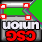
<style>
.page{position:relative;width:42px;height:42px}
.page>*{position:absolute;margin:0}
.t1{font:13.7px "Arial-Black";letter-spacing:-0.075em;color:#eeeaf6}
.t2{font:13.7px "Arial-Black";letter-spacing:-0.075em;color:#ff0000}
</style>
<div class="page">
<p class="t1" style="left:2px;top:21px;width:37px;height:11px;rotate:-180deg">union</p>
<p class="t2" style="left:6px;top:30px;width:30px;height:11px;rotate:-180deg">CSG</p>
</div>
